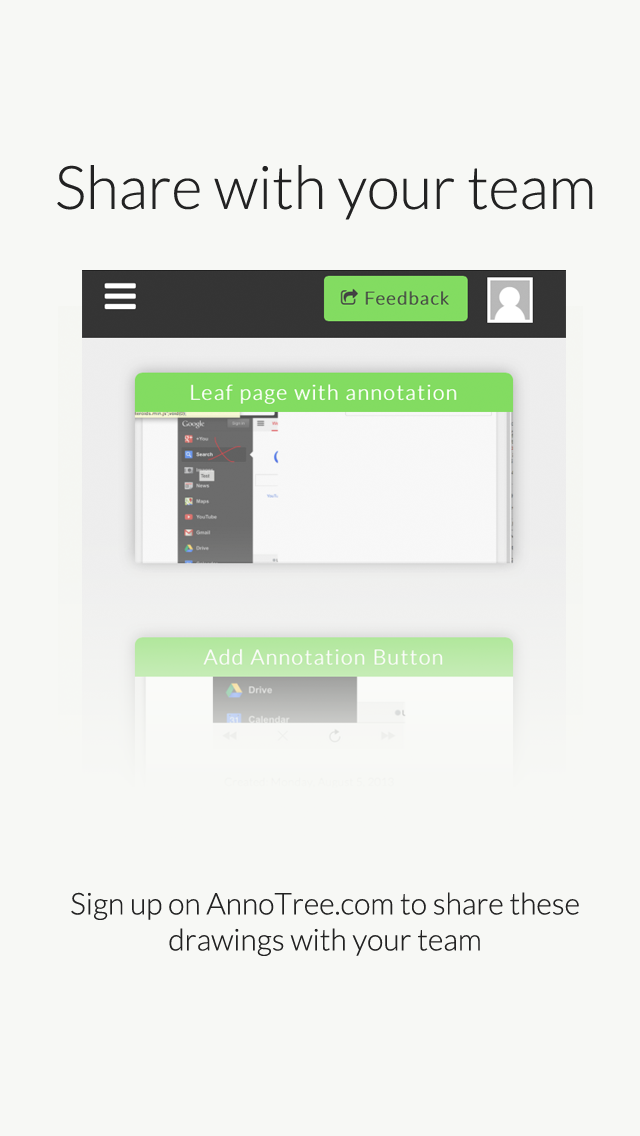
<style>
.page{position:relative;width:640px;height:1136px;background:#f7f8f5}
.page>*{position:absolute;margin:0}
.t1{font:60px "Lato-Light";color:#222222}
.t2{font:30px "Lato-Light";color:#222222}
</style>
<div class="page">
<p class="t1" style="left:57px;top:165px;width:536px;height:55px">Share with your team</p>
<p class="t2" style="left:71px;top:892px;width:508px;height:64px;text-align:center">Sign up on AnnoTree.com to share these<br>drawings with your team</p>
</div>
